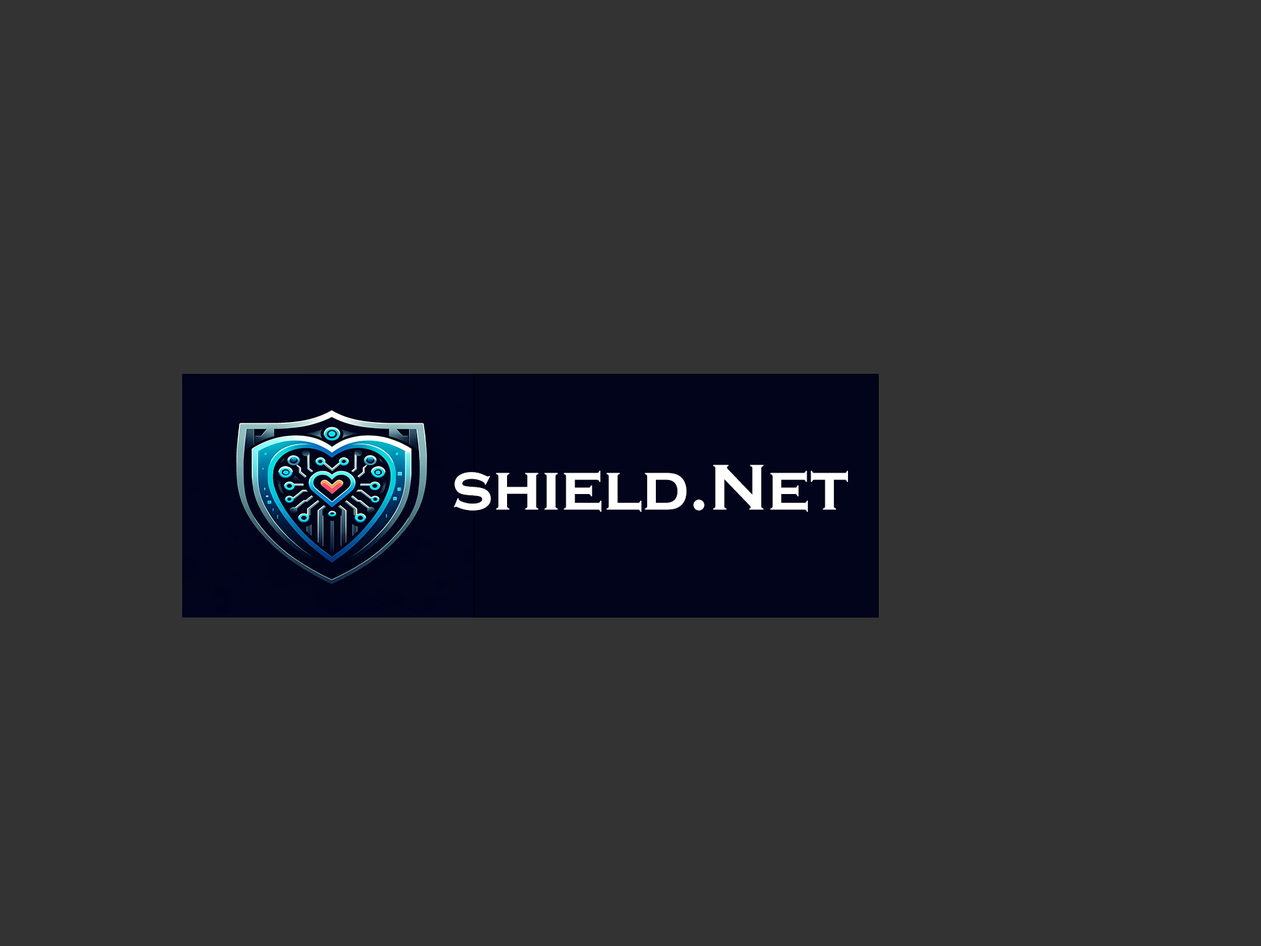
<style>
.page{position:relative;width:1261px;height:946px;background:#333333}
.page>*{position:absolute;margin:0}
.t1{font:66.7px "CopperplateGothic-Bold";color:#ffffff}
</style>
<div class="page">
<p class="t1" style="left:454px;top:464px;width:394px;height:48px">shield.Net</p>
</div>
